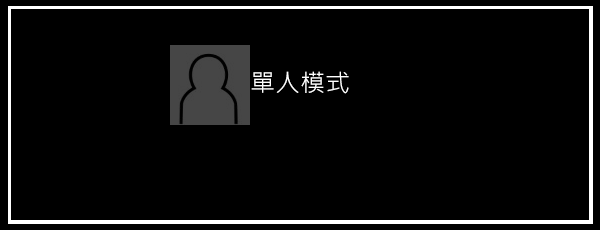
<style>
.page{position:relative;width:600px;height:230px;background:#000000}
.page>*{position:absolute;margin:0}
.t1{font:24.3px "MicrosoftJhengHeiRegular";color:#ffffff}
</style>
<div class="page">
<p class="t1" style="left:251px;top:71px;width:98px;height:23px">單人模式</p>
</div>
